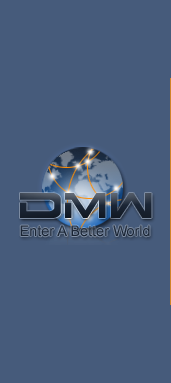
<style>
.page{position:relative;width:171px;height:383px;background:#465b7b}
.page>*{position:absolute;margin:0}
.t1{font:43px "Dodger"}
.t2{font:14.5px "ArialMT";color:#1b2636}
</style>
<div class="page">
<p class="t1" style="left:20px;top:193px;width:132px;height:25px">DMW</p>
<p class="t2" style="left:20px;top:225px;width:130px;height:12px">Enter A Better World</p>
</div>
